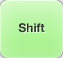
<style>
.page{position:relative;width:63px;height:58px}
.page>*{position:absolute;margin:0}
.t1{font:12px "HelveticaNeueBold";color:#2c3c27}
</style>
<div class="page">
<p class="t1" style="left:18px;top:23px;width:27px;height:10px">Shift</p>
</div>
